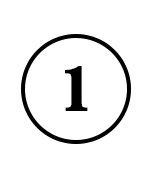
<style>
.page{position:relative;width:152px;height:178px;background:#ffffff}
.page>*{position:absolute;margin:0}
.t1{font:66.7px "Baskerville-Bold";color:#000000}
</style>
<div class="page">
<p class="t1" style="left:65px;top:66px;width:23px;height:45px">1</p>
</div>
